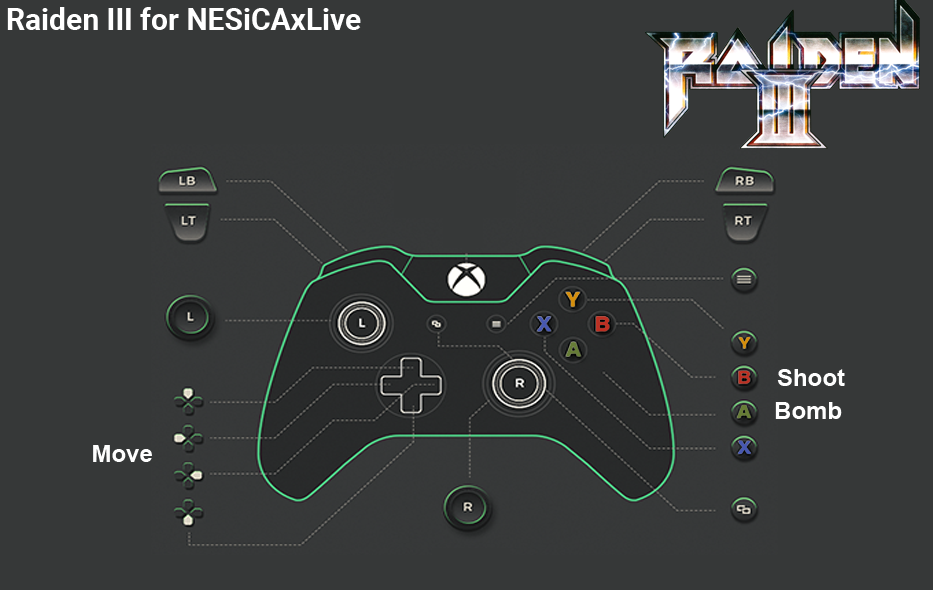
<style>
.page{position:relative;width:933px;height:590px;background:#363838}
.page>*{position:absolute;margin:0}
.t1{font:30px "Roboto-Bold";color:#ffffff}
.t2{font:24px "Arial-BoldMT";color:#fefefe}
</style>
<div class="page">
<p class="t1" style="left:7px;top:7px;width:354px;height:23px">Raiden III for NESiCAxLive</p>
<p class="t2" style="left:777px;top:369px;width:68px;height:17px">Shoot</p>
<p class="t2" style="left:775px;top:402px;width:67px;height:17px">Bomb</p>
<p class="t2" style="left:93px;top:445px;width:59px;height:17px">Move</p>
</div>
